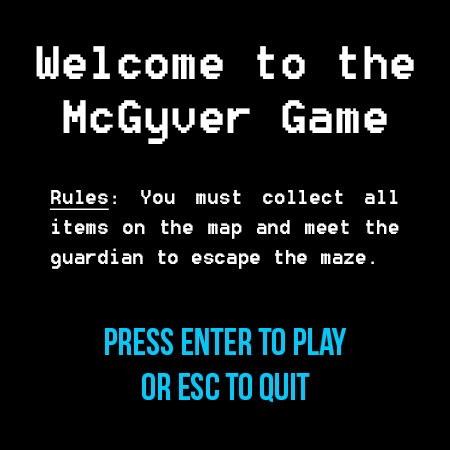
<style>
.page{position:relative;width:450px;height:450px;background:#000000}
.page>*{position:absolute;margin:0}
.t1{font:58.3px/54.2px "8514oem";color:#ffffff}
.t2{font:25px "8514oem";color:#ffffff}
.t3{font:25px "8514oem";color:#ffffff;text-decoration:underline}
.t4{font:37.5px "BebasNeue";color:#00c9fb}
</style>
<div class="page">
<p class="t1" style="left:36px;top:46px;width:378px;height:98px;text-align:center">Welcome to the <br>McGyver Game</p>
<p class="t2" style="left:50px;top:190px;width:349px;height:79px;text-align:justify"><span class="t3">Rules</span>: You must collect all items on the map and meet the guardian to escape the maze.</p>
<p class="t4" style="left:105px;top:328px;width:242px;height:74px;text-align:center">Press enter to play<br>or esc to quit</p>
</div>
